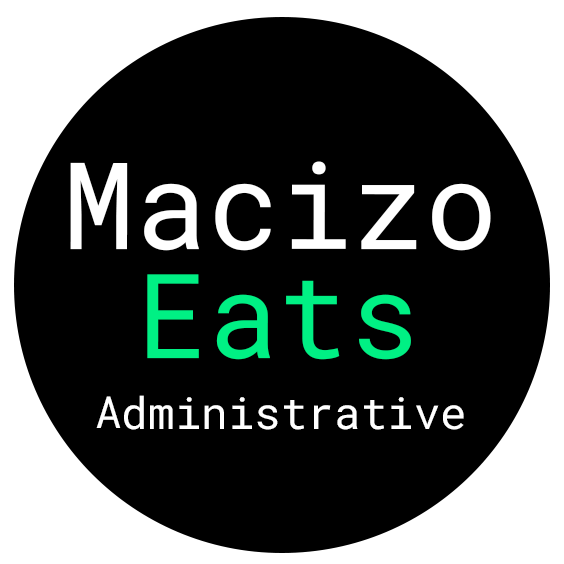
<style>
.page{position:relative;width:564px;height:564px;background:#000000}
.page>*{position:absolute;margin:0}
.t1{font:121.1px "RobotoMono-Regular";color:#ffffff}
.t2{font:117.5px "RobotoMono-Regular";color:#00f084}
.t3{font:44.3px "RobotoMono-Regular";color:#ffffff}
</style>
<div class="page">
<p class="t1" style="left:70px;top:161px;width:421px;height:90px">Macizo</p>
<p class="t2" style="left:147px;top:274px;width:264px;height:86px">Eats</p>
<p class="t3" style="left:96px;top:395px;width:368px;height:35px">Administrative</p>
</div>
